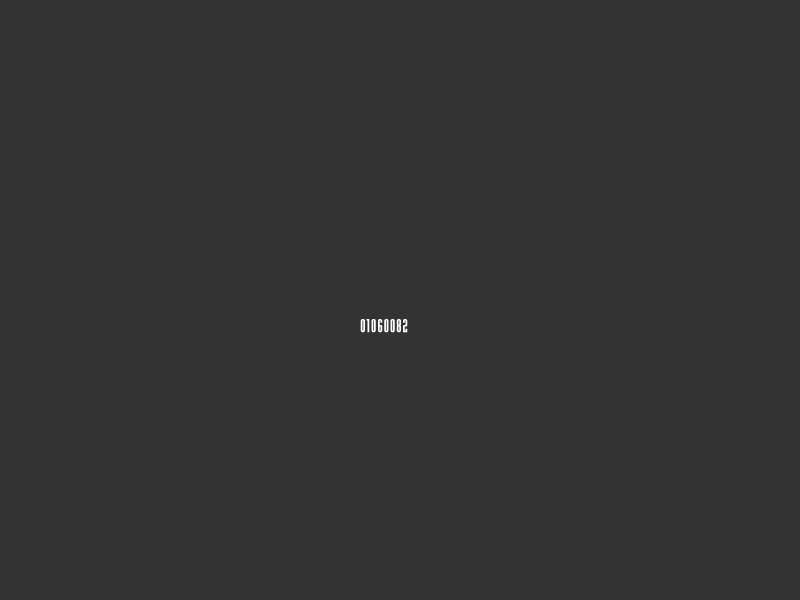
<style>
.page{position:relative;width:800px;height:600px;background:#333333}
.page>*{position:absolute;margin:0}
.t1{font:18px "Industria-Solid";letter-spacing:0.025em;color:#ffffff;font-weight:bold}
</style>
<div class="page">
<p class="t1" style="left:360px;top:319px;width:48px;height:14px">01060082</p>
</div>
